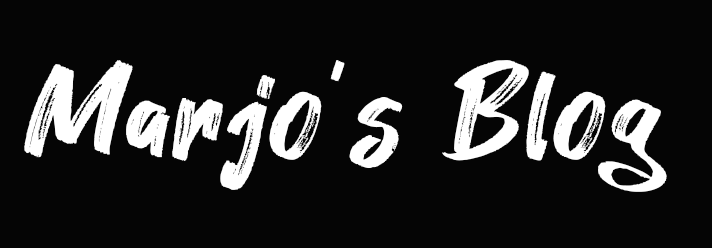
<style>
.page{position:relative;width:712px;height:248px;background:#050505}
.page>*{position:absolute;margin:0}
.t1{font:132.5px "Hey-August";letter-spacing:0.025em;color:#ffffff}
</style>
<div class="page">
<p class="t1" style="left:24px;top:60px;width:643px;height:132px">Marjo’s Blog</p>
</div>
